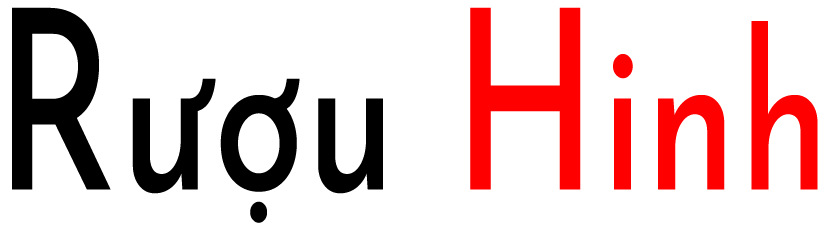
<style>
.page{position:relative;width:827px;height:228px;background:#ffffff}
.page>*{position:absolute;margin:0}
.t1{font:216.7px "JosefinSans-Medium";letter-spacing:0.01em;color:#000000;scale:0.75 1}
.t2{font:250px "JosefinSans-Medium";letter-spacing:0.01em;color:#000000;scale:0.75 1}
.t3{font:250px "JosefinSans-Medium";letter-spacing:0.01em;color:#ff0000;scale:0.75 1}
.t4{font:216.7px "JosefinSans-Medium";letter-spacing:0.01em;color:#ff0000;scale:0.75 1}
</style>
<div class="page">
<p class="t1" style="left:12px;top:7px;width:806px;height:216px"><span class="t2">R</span>ượu <span class="t3">H</span><span class="t4">inh</span></p>
</div>
